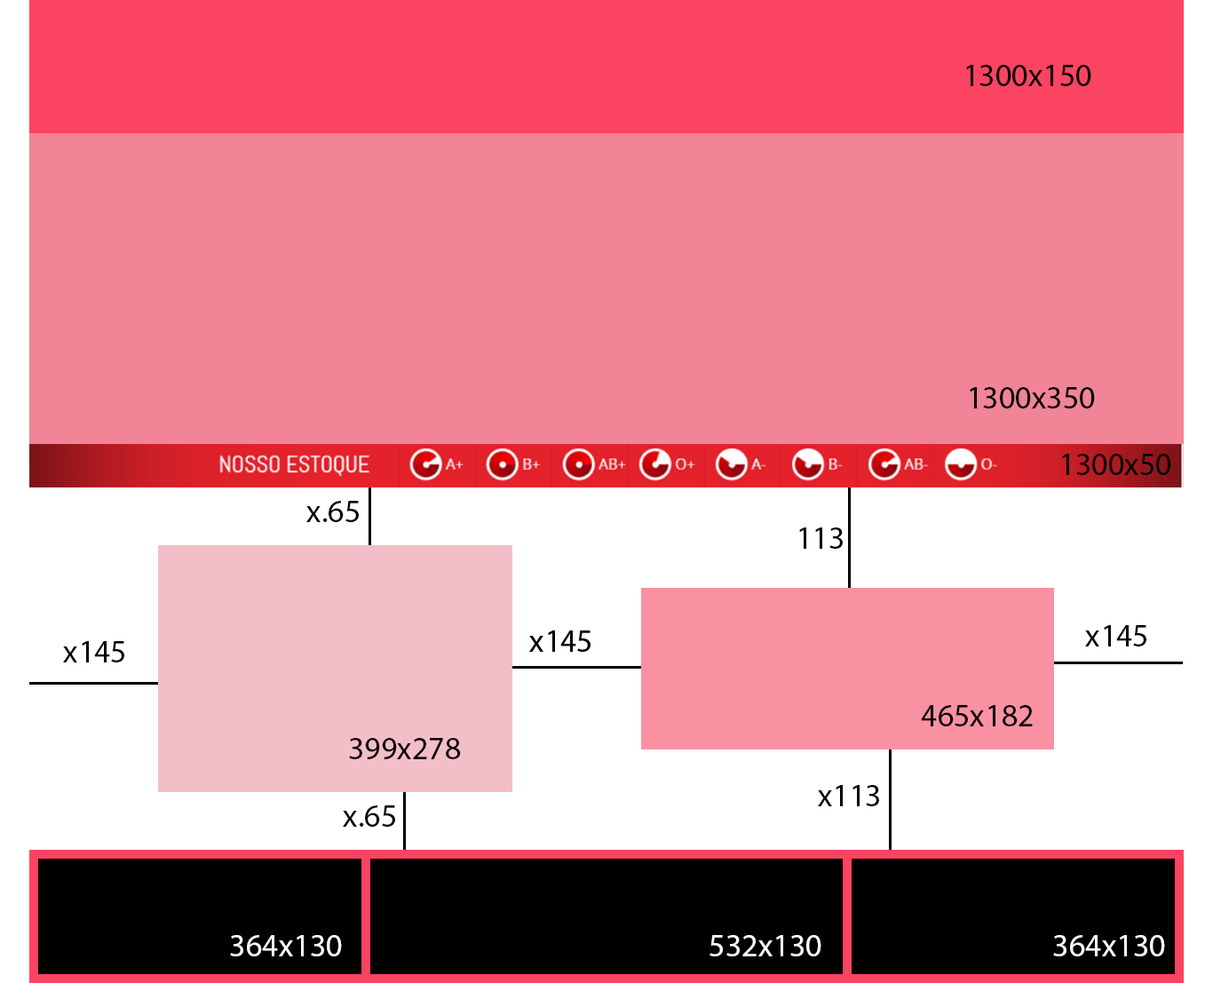
<style>
.page{position:relative;width:1213px;height:983px;background:#f18496}
.page>*{position:absolute;margin:0}
.t1{font:32px "MyriadPro-Regular";color:#000000}
.t2{font:32px "MyriadPro-Regular";color:#ffffff}
</style>
<div class="page">
<p class="t1" style="left:966px;top:65px;width:125px;height:21px">1300x150</p>
<p class="t1" style="left:970px;top:387px;width:125px;height:21px">1300x350</p>
<p class="t1" style="left:1062px;top:454px;width:109px;height:21px">1300x50</p>
<p class="t1" style="left:306px;top:501px;width:53px;height:21px">x.65</p>
<p class="t1" style="left:799px;top:527px;width:44px;height:22px">113</p>
<p class="t1" style="left:1085px;top:625px;width:61px;height:21px">x145</p>
<p class="t1" style="left:63px;top:641px;width:61px;height:21px">x145</p>
<p class="t1" style="left:921px;top:705px;width:112px;height:21px">465x182</p>
<p class="t1" style="left:349px;top:738px;width:112px;height:21px">399x278</p>
<p class="t1" style="left:818px;top:785px;width:61px;height:21px">x113</p>
<p class="t1" style="left:343px;top:805px;width:52px;height:22px">x.65</p>
<p class="t2" style="left:230px;top:935px;width:112px;height:21px">364x130</p>
<p class="t2" style="left:710px;top:935px;width:111px;height:21px">532x130</p>
<p class="t2" style="left:1053px;top:935px;width:112px;height:21px">364x130</p>
</div>
